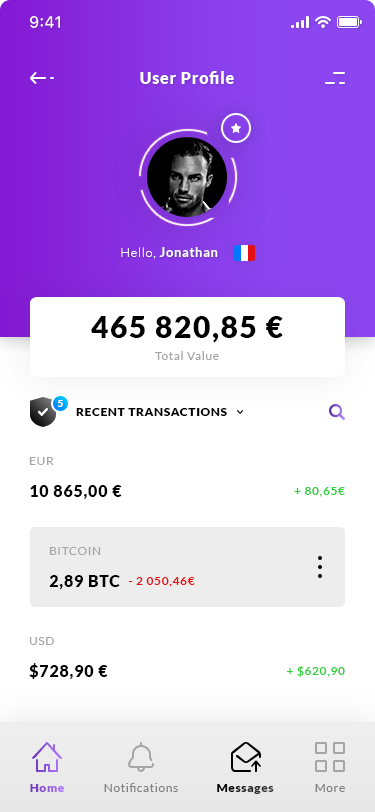
<style>
.page{position:relative;width:375px;height:812px;background:#ffffff}
.page>*{position:absolute;margin:0}
.t1{font:16px "Lato-Black";letter-spacing:0.05em;color:#ffffff}
.t2{font:13px "Lato-Bold";letter-spacing:0.05em;color:#ffffff}
.t3{font:13px "Lato-Light";letter-spacing:0.05em;color:#ffffff}
.t4{font:30px/22px "Lato-Black";letter-spacing:0.05em;color:#000000}
.t5{font:12px/22px "Lato-Regular";letter-spacing:0.05em;color:#a5a5a5}
.t6{font:10px "Lato-Black";letter-spacing:0.05em;color:#ffffff}
.t7{font:12px "Lato-Black";letter-spacing:0.05em;color:#000000;text-transform:uppercase}
.t8{font:12px "Lato-Regular";letter-spacing:0.05em;color:#a5a5a5}
.t9{font:16px "Lato-Black";letter-spacing:0.05em;color:#000000}
.t10{font:12px "Lato-Bold";letter-spacing:0.05em;color:#2ed03d}
.t11{font:12px "Lato-Bold";letter-spacing:0.05em;color:#e31111}
.t12{font:12px "Lato-Black";letter-spacing:0.05em}
.t13{font:12px "Lato-Regular";letter-spacing:0.05em;color:#808080}
</style>
<div class="page">
<p class="t1" style="left:140px;top:71px;width:94px;height:13px">User Profile</p>
<p class="t2" style="left:121px;top:247px;width:97px;height:12px"><span class="t3">Hello, </span>Jonathan</p>
<p class="t4" style="left:91px;top:316px;width:192px;height:44px;text-align:center">465 820,85 €<br><span class="t5">Total Value</span></p>
<p class="t6" style="left:57px;top:400px;width:6px;height:7px">5</p>
<p class="t7" style="left:76px;top:408px;width:151px;height:8px">Recent Transactions</p>
<p class="t8" style="left:29px;top:457px;width:25px;height:8px">EUR</p>
<p class="t9" style="left:30px;top:485px;width:92px;height:15px">10 865,00 €</p>
<p class="t10" style="left:294px;top:487px;width:51px;height:10px">+ 80,65€</p>
<p class="t8" style="left:49px;top:547px;width:52px;height:8px">BITCOIN</p>
<p class="t11" style="left:49px;top:575px;width:146px;height:15px"><span class="t9">2,89 BTC  </span>- 2 050,46€</p>
<p class="t8" style="left:29px;top:637px;width:25px;height:8px">USD</p>
<p class="t9" style="left:29px;top:663px;width:79px;height:17px">$728,90 €</p>
<p class="t10" style="left:286px;top:666px;width:59px;height:11px">+ $620,90</p>
<p class="t12" style="left:30px;top:784px;width:34px;height:8px">Home</p>
<p class="t13" style="left:104px;top:783px;width:74px;height:9px">Notifications</p>
<p class="t12" style="left:217px;top:784px;width:57px;height:10px">Messages</p>
<p class="t13" style="left:315px;top:784px;width:30px;height:8px">More</p>
</div>
